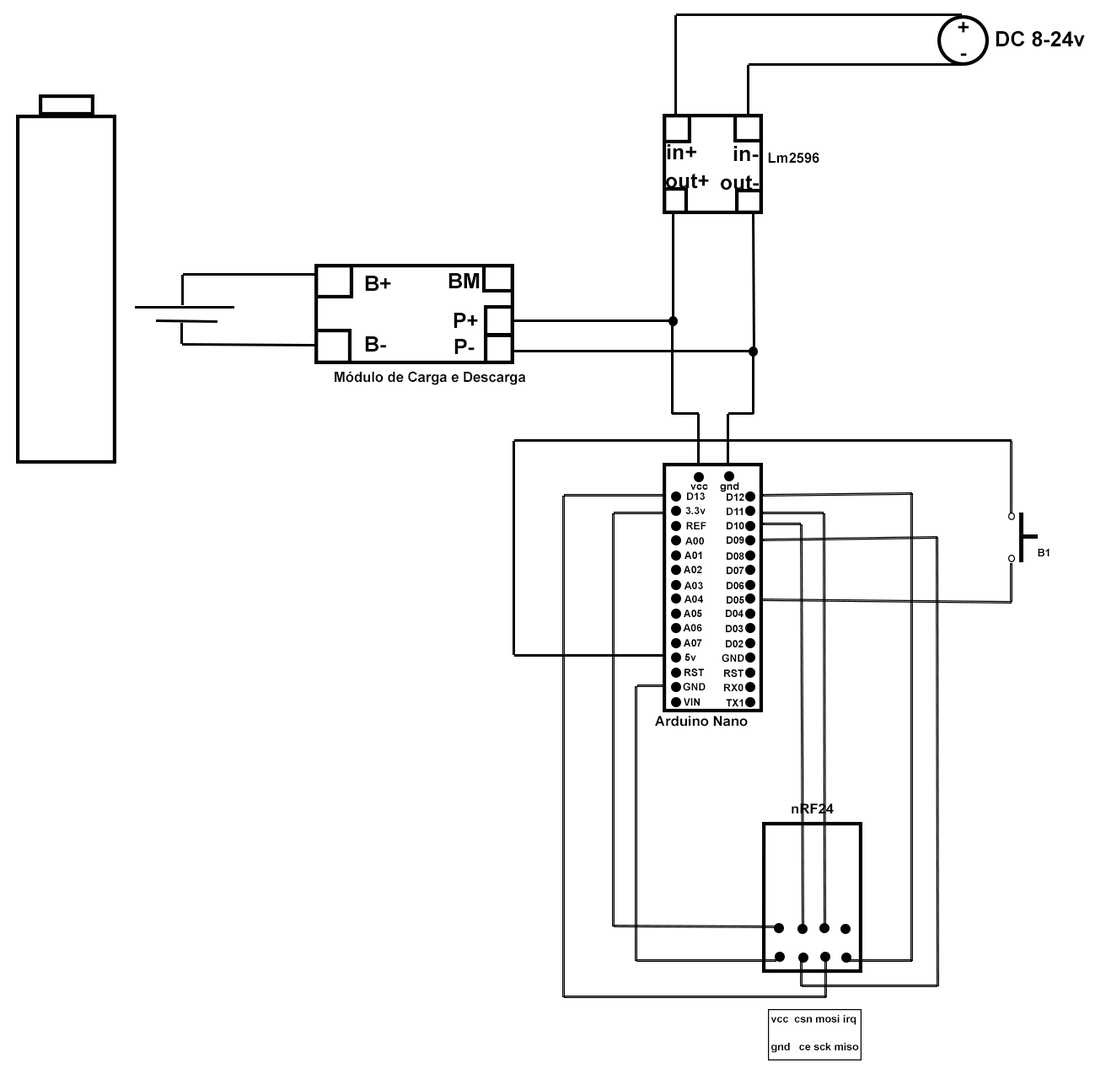
<style>
.page{position:relative;width:1106px;height:1079px;background:#ffffff}
.page>*{position:absolute;margin:0}
.t1{font:21.2px "Arial-BoldMT";color:#000000}
.t2{font:14px "Arial-BoldMT";color:#000000}
.t3{font:21.1px "Arial-BoldMT";color:#000000}
.t4{font:10.2px "Arial-BoldMT";color:#000000;scale:1.04 1}
.t5{font:10.2px "Arial-BoldMT";color:#000000;scale:1.03 1}
.t6{font:10.3px "Arial-BoldMT";color:#000000}
.t7{font:10.2px "Arial-BoldMT";color:#000000}
.t8{font:10.5px "Arial-BoldMT";color:#000000}
.t9{font:13.7px "Arial-BoldMT";color:#000000}
.t10{font:13.6px "Arial-BoldMT";color:#000000;scale:1.03 1}
.t11{font:10.5px/28.3px "Arial-BoldMT";color:#000000}
</style>
<div class="page">
<p class="t1" style="left:957px;top:22px;width:11px;height:34px;text-align:center">+<br>-</p>
<p class="t1" style="left:995px;top:30px;width:89px;height:17px">DC 8-24v</p>
<p class="t1" style="left:667px;top:144px;width:29px;height:15px">in+</p>
<p class="t1" style="left:733px;top:146px;width:25px;height:15px">in-</p>
<p class="t2" style="left:768px;top:153px;width:51px;height:10px">Lm2596</p>
<p class="t3" style="left:666px;top:173px;width:43px;height:16px">out+</p>
<p class="t3" style="left:720px;top:174px;width:38px;height:16px">out-</p>
<p class="t1" style="left:365px;top:276px;width:26px;height:15px">B+</p>
<p class="t1" style="left:448px;top:273px;width:31px;height:15px">BM</p>
<p class="t1" style="left:453px;top:313px;width:25px;height:15px">P+</p>
<p class="t1" style="left:365px;top:336px;width:21px;height:15px">B-</p>
<p class="t1" style="left:454px;top:339px;width:20px;height:15px">P-</p>
<p class="t2" style="left:335px;top:371px;width:191px;height:14px">Módulo de Carga e Descarga</p>
<p class="t4" style="left:690px;top:484px;width:18px;height:6px">vcc</p>
<p class="t5" style="left:720px;top:482px;width:19px;height:10px">gnd</p>
<p class="t6" style="left:687px;top:492px;width:17px;height:8px">D13</p>
<p class="t7" style="left:726px;top:493px;width:18px;height:8px">D12</p>
<p class="t7" style="left:685px;top:506px;width:20px;height:8px">3.3v</p>
<p class="t7" style="left:726px;top:507px;width:16px;height:8px">D11</p>
<p class="t6" style="left:686px;top:522px;width:20px;height:7px">REF</p>
<p class="t7" style="left:726px;top:522px;width:18px;height:7px">D10</p>
<p class="t6" style="left:685px;top:537px;width:19px;height:7px">A00</p>
<p class="t7" style="left:726px;top:536px;width:18px;height:8px">D09</p>
<p class="t7" style="left:684px;top:551px;width:18px;height:8px">A01</p>
<p class="t7" style="left:726px;top:552px;width:18px;height:8px">D08</p>
<p class="t8" style="left:1037px;top:549px;width:12px;height:7px">B1</p>
<p class="t7" style="left:683px;top:565px;width:19px;height:8px">A02</p>
<p class="t7" style="left:726px;top:566px;width:18px;height:8px">D07</p>
<p class="t6" style="left:683px;top:581px;width:20px;height:8px">A03</p>
<p class="t7" style="left:726px;top:581px;width:18px;height:8px">D06</p>
<p class="t6" style="left:683px;top:595px;width:20px;height:7px">A04</p>
<p class="t7" style="left:726px;top:596px;width:18px;height:7px">D05</p>
<p class="t7" style="left:683px;top:609px;width:19px;height:8px">A05</p>
<p class="t7" style="left:726px;top:609px;width:17px;height:8px">D04</p>
<p class="t6" style="left:683px;top:624px;width:19px;height:7px">A06</p>
<p class="t7" style="left:726px;top:624px;width:17px;height:8px">D03</p>
<p class="t7" style="left:683px;top:639px;width:19px;height:7px">A07</p>
<p class="t7" style="left:726px;top:640px;width:17px;height:7px">D02</p>
<p class="t4" style="left:684px;top:653px;width:12px;height:8px">5v</p>
<p class="t7" style="left:721px;top:654px;width:23px;height:8px">GND</p>
<p class="t7" style="left:684px;top:668px;width:20px;height:9px">RST</p>
<p class="t7" style="left:724px;top:669px;width:19px;height:8px">RST</p>
<p class="t7" style="left:683px;top:683px;width:22px;height:8px">GND</p>
<p class="t7" style="left:724px;top:683px;width:19px;height:8px">RX0</p>
<p class="t7" style="left:683px;top:698px;width:16px;height:7px">VIN</p>
<p class="t7" style="left:726px;top:699px;width:17px;height:7px">TX1</p>
<p class="t9" style="left:655px;top:715px;width:92px;height:11px">Arduino Nano</p>
<p class="t10" style="left:791px;top:803px;width:42px;height:10px">nRF24</p>
<p class="t11" style="left:770px;top:1015px;width:89px;height:37px">vcc  csn mosi irq<br>gnd   ce sck miso</p>
</div>
